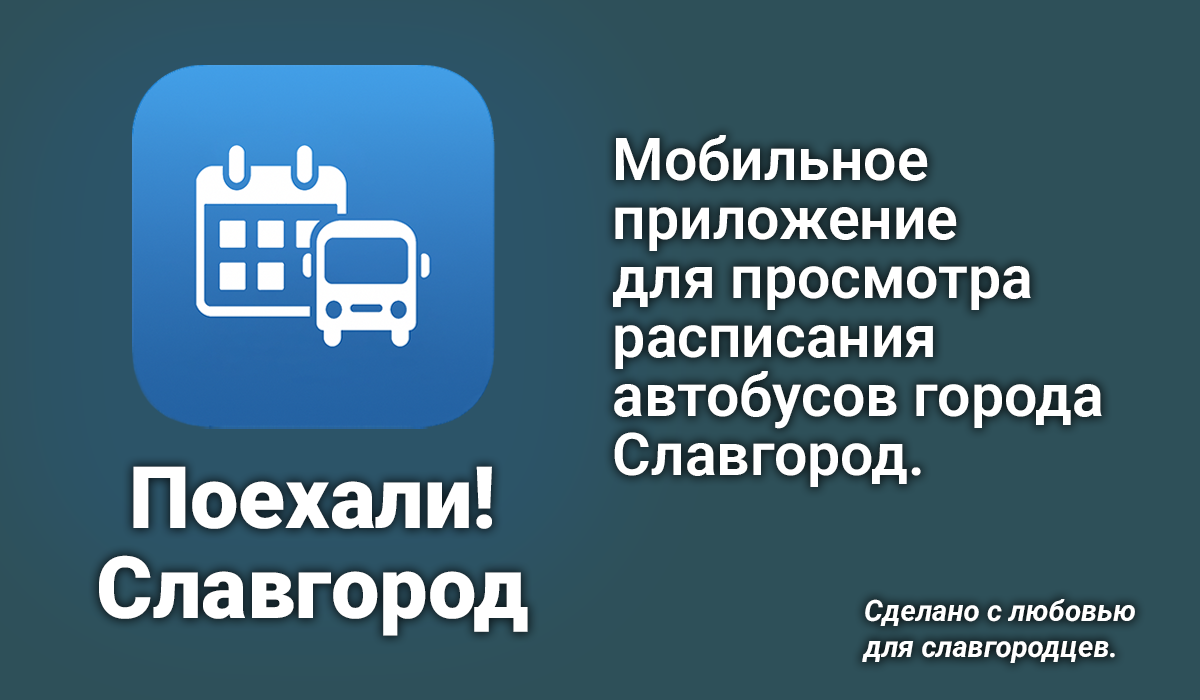
<style>
.page{position:relative;width:1200px;height:700px;background:#2e5059}
.page>*{position:absolute;margin:0}
.t1{font:58.9px/58.9px "Roboto-SemiBold";color:#ffffff}
.t2{font:86.3px/90.2px "Roboto-Black";color:#ffffff}
.t3{font:29.4px "Roboto-BoldItalic";color:#ffffff}
</style>
<div class="page">
<p class="t1" style="left:613px;top:135px;width:489px;height:352px">Мобильное<br>приложение<br>для просмотра<br>расписания<br>автобусов города<br>Славгород.</p>
<p class="t2" style="left:99px;top:466px;width:429px;height:170px;text-align:center">Поехали!<br>Славгород</p>
<p class="t3" style="left:862px;top:599px;width:273px;height:64px">Сделано с любовью<br>для славгородцев.</p>
</div>
